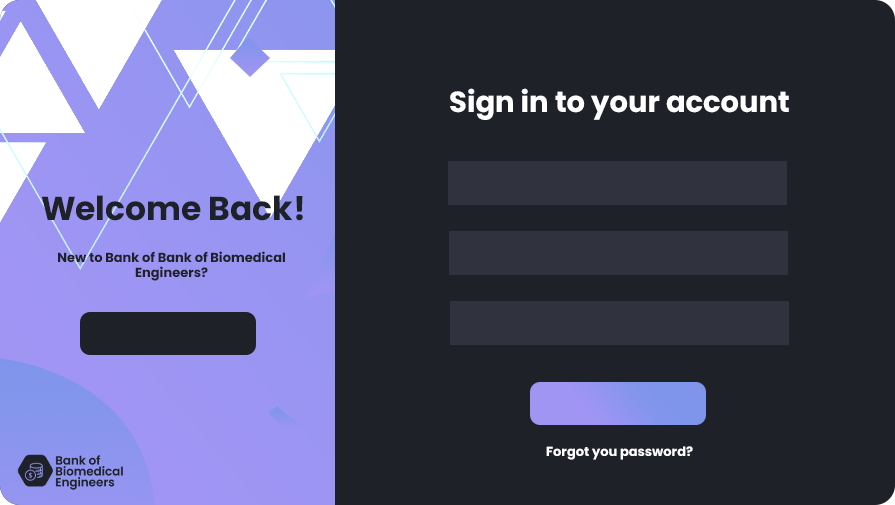
<style>
.page{position:relative;width:895px;height:505px;background:#1f2128}
.page>*{position:absolute;margin:0}
.t1{font:29px "Poppins-Bold";color:#ffffff}
.t2{font:33px "Poppins-Bold";color:#1f2128}
.t3{font:13px "Poppins-Bold";color:#1f2128}
.t4{font:13px "Poppins-Bold";color:#ffffff}
</style>
<div class="page">
<p class="t1" style="left:450px;top:88px;width:339px;height:32px">Sign in to your account</p>
<p class="t2" style="left:41px;top:195px;width:262px;height:26px">Welcome Back!</p>
<p class="t3" style="left:58px;top:251px;width:227px;height:30px;text-align:center">New to Bank of Bank of Biomedical<br>Engineers?</p>
<p class="t4" style="left:546px;top:446px;width:147px;height:14px">Forgot you password?</p>
</div>
